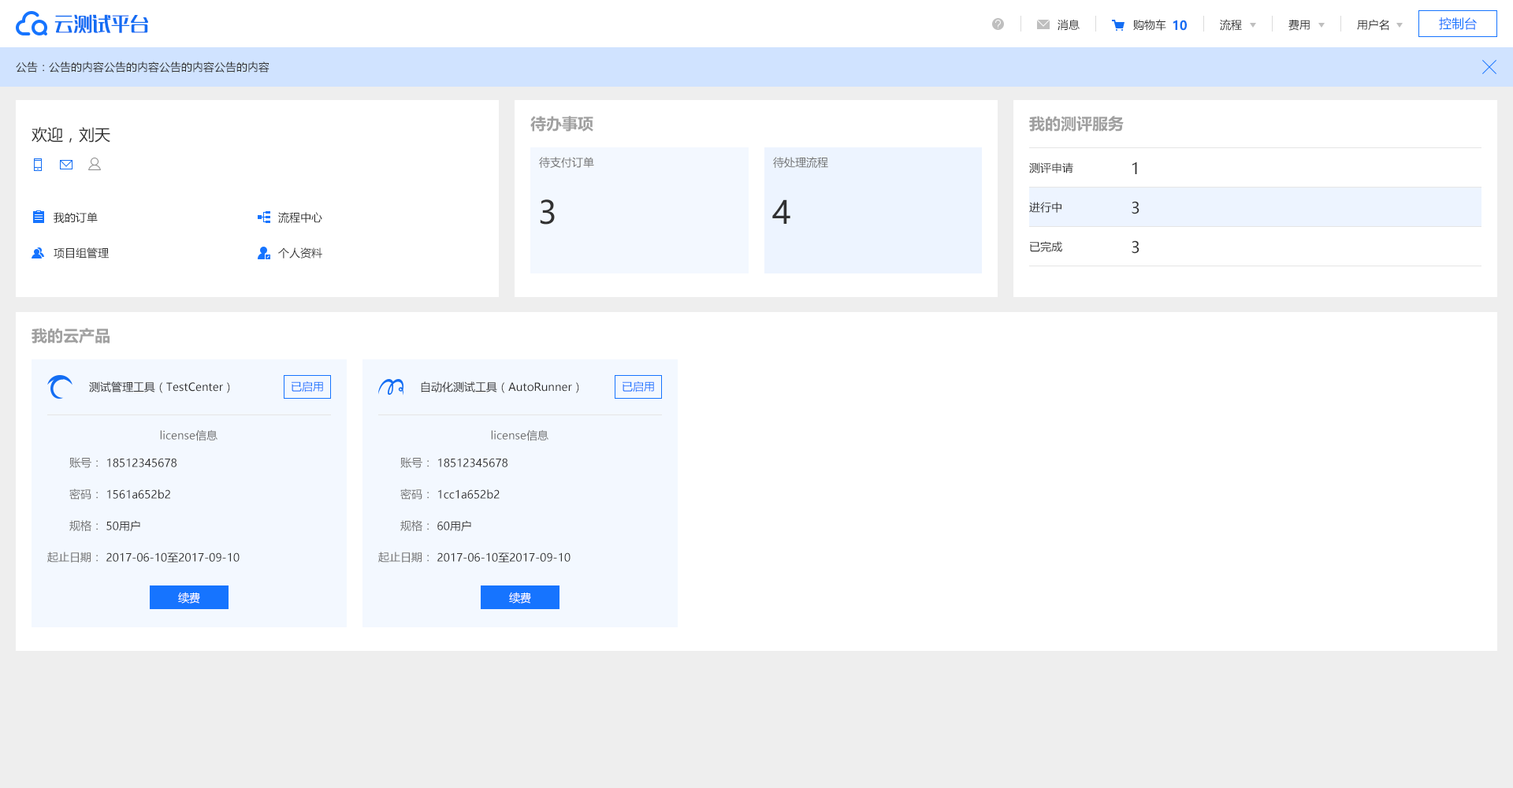
<style>
.page{position:relative;width:1513px;height:788px;background:#ffffff}
.page>*{position:absolute;margin:0}
.t1{font:18.9px "MFLangQian_Noncommercial-Regular";color:#136df3}
.t2{font:12.6px "MicrosoftYaHei";color:#1674ff}
.t3{font:11px "MicrosoftYaHei";color:#313131}
.t4{font:12.6px "MicrosoftYaHei-Bold";color:#136df3}
.t5{font:15.8px "MicrosoftYaHei-Bold";color:#a0a0a0}
.t6{font:15.8px "MicrosoftYaHei";color:#313131}
.t7{font:11px "MicrosoftYaHei";color:#707070}
.t8{font:31.5px "MicrosoftYaHei";color:#313131}
.t9{font:11px "MicrosoftYaHei";color:#1674ff}
.t10{font:11px "MicrosoftYaHei";color:#ffffff}
</style>
<div class="page">
<p class="t1" style="left:54px;top:14px;width:94px;height:19px">云测试平台</p>
<p class="t2" style="left:1439px;top:17px;width:38px;height:13px">控制台</p>
<p class="t3" style="left:1058px;top:19px;width:22px;height:12px">消息</p>
<p class="t3" style="left:1133px;top:19px;width:33px;height:12px">购物车</p>
<p class="t4" style="left:1173px;top:20px;width:14px;height:11px">10</p>
<p class="t3" style="left:1220px;top:19px;width:22px;height:12px">流程</p>
<p class="t3" style="left:1288px;top:20px;width:22px;height:11px">费用</p>
<p class="t3" style="left:1357px;top:19px;width:32px;height:12px">用户名</p>
<p class="t3" style="left:16px;top:61px;width:254px;height:12px">公告：公告的内容公告的内容公告的内容公告的内容</p>
<p class="t5" style="left:530px;top:116px;width:63px;height:16px">待办事项</p>
<p class="t5" style="left:1029px;top:116px;width:95px;height:16px">我的测评服务</p>
<p class="t6" style="left:32px;top:127px;width:78px;height:16px">欢迎，刘天</p>
<p class="t7" style="left:539px;top:157px;width:55px;height:11px">待支付订单</p>
<p class="t7" style="left:773px;top:157px;width:55px;height:11px">待处理流程</p>
<p class="t6" style="left:1132px;top:162px;width:5px;height:12px">1</p>
<p class="t3" style="left:1029px;top:162px;width:44px;height:11px">测评申请</p>
<p class="t8" style="left:540px;top:199px;width:15px;height:26px">3</p>
<p class="t8" style="left:772px;top:199px;width:18px;height:25px">4</p>
<p class="t3" style="left:1029px;top:202px;width:33px;height:11px">进行中</p>
<p class="t6" style="left:1132px;top:201px;width:8px;height:13px">3</p>
<p class="t3" style="left:54px;top:212px;width:44px;height:11px">我的订单</p>
<p class="t3" style="left:278px;top:212px;width:44px;height:11px">流程中心</p>
<p class="t3" style="left:1030px;top:241px;width:32px;height:11px">已完成</p>
<p class="t6" style="left:1132px;top:240px;width:8px;height:14px">3</p>
<p class="t3" style="left:54px;top:247px;width:55px;height:11px">项目组管理</p>
<p class="t3" style="left:278px;top:247px;width:44px;height:11px">个人资料</p>
<p class="t5" style="left:32px;top:328px;width:78px;height:16px">我的云产品</p>
<p class="t3" style="left:89px;top:381px;width:141px;height:12px">测试管理工具（TestCenter）</p>
<p class="t9" style="left:292px;top:381px;width:31px;height:11px">已启用</p>
<p class="t3" style="left:421px;top:381px;width:158px;height:12px">自动化测试工具（AutoRunner）</p>
<p class="t9" style="left:623px;top:381px;width:31px;height:11px">已启用</p>
<p class="t7" style="left:160px;top:429px;width:58px;height:12px">license信息</p>
<p class="t7" style="left:491px;top:429px;width:57px;height:12px">license信息</p>
<p class="t7" style="left:69px;top:457px;width:29px;height:11px">账号：</p>
<p class="t3" style="left:107px;top:458px;width:70px;height:9px">18512345678</p>
<p class="t7" style="left:400px;top:457px;width:29px;height:11px">账号：</p>
<p class="t3" style="left:438px;top:458px;width:70px;height:9px">18512345678</p>
<p class="t7" style="left:69px;top:489px;width:29px;height:11px">密码：</p>
<p class="t3" style="left:107px;top:489px;width:63px;height:10px">1561a652b2</p>
<p class="t7" style="left:400px;top:489px;width:29px;height:11px">密码：</p>
<p class="t3" style="left:438px;top:489px;width:62px;height:10px">1cc1a652b2</p>
<p class="t7" style="left:69px;top:520px;width:29px;height:11px">规格：</p>
<p class="t3" style="left:106px;top:520px;width:34px;height:12px">50用户</p>
<p class="t7" style="left:400px;top:520px;width:29px;height:11px">规格：</p>
<p class="t3" style="left:437px;top:520px;width:34px;height:12px">60用户</p>
<p class="t7" style="left:47px;top:552px;width:51px;height:11px">起止日期：</p>
<p class="t3" style="left:106px;top:552px;width:134px;height:11px">2017-06-10至2017-09-10</p>
<p class="t7" style="left:378px;top:552px;width:51px;height:11px">起止日期：</p>
<p class="t3" style="left:437px;top:552px;width:134px;height:11px">2017-06-10至2017-09-10</p>
<p class="t10" style="left:178px;top:592px;width:22px;height:12px">续费</p>
<p class="t10" style="left:509px;top:592px;width:22px;height:12px">续费</p>
</div>
